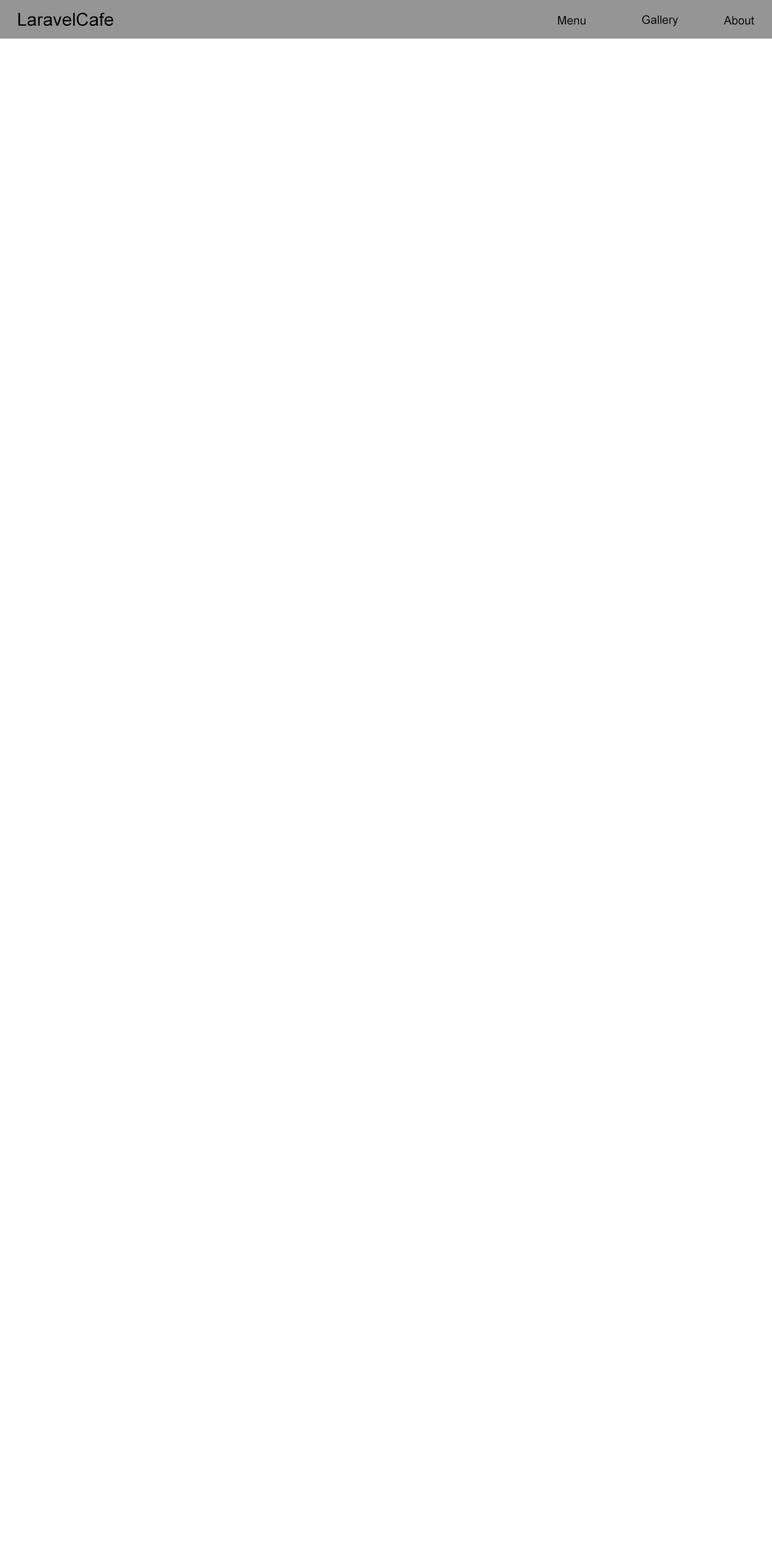
<style>
.page{position:relative;width:772px;height:1544px;background:#ffffff}
.page>*{position:absolute;margin:0}
.t1{font:18px "ArialMT";color:#000000}
.t2{font:11.6px "ArialMT";color:#000000}
</style>
<div class="page">
<p class="t1" style="left:18px;top:12px;width:95px;height:14px">LaravelCafe</p>
<p class="t2" style="left:558px;top:16px;width:28px;height:9px">Menu</p>
<p class="t2" style="left:642px;top:15px;width:36px;height:11px">Gallery</p>
<p class="t2" style="left:724px;top:16px;width:31px;height:9px">About</p>
</div>
